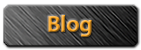
<style>
.page{position:relative;width:141px;height:50px}
.page>*{position:absolute;margin:0}
.t1{font:23.6px "MyriadPro-Bold";letter-spacing:-0.025em}
</style>
<div class="page">
<p class="t1" style="left:48px;top:15px;width:44px;height:22px">Blog</p>
</div>
